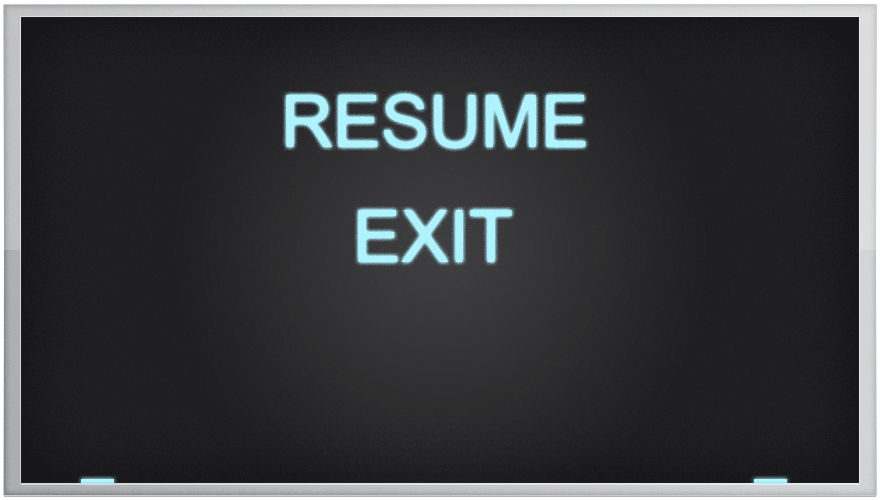
<style>
.page{position:relative;width:880px;height:500px}
.page>*{position:absolute;margin:0}
.t1{font:72px "ArialMT";color:#aef3ff}
</style>
<div class="page">
<p class="t1" style="left:286px;top:94px;width:300px;height:54px">RESUME</p>
<p class="t1" style="left:358px;top:210px;width:154px;height:52px">EXIT</p>
</div>
